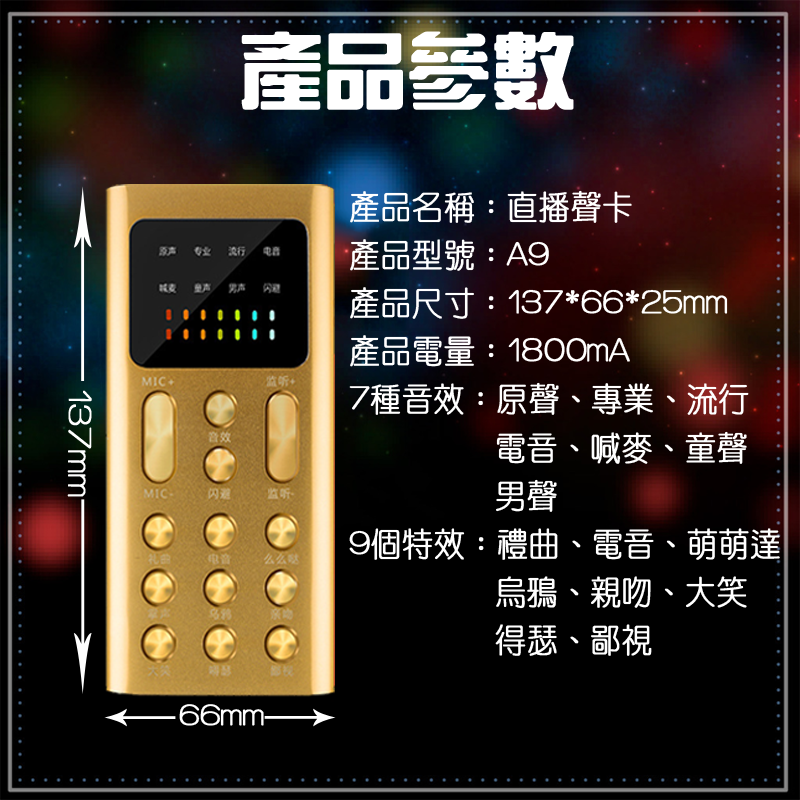
<style>
.page{position:relative;width:800px;height:800px;background:#000000}
.page>*{position:absolute;margin:0}
.t1{font:81.9px "HanWangZonYi";color:#ffffff;font-weight:bold}
.t2{font:33.4px "HanWangYenLight";color:#ffffff;font-weight:bold;scale:0.92 1}
.t3{font:33.1px "HanWangYenLight";color:#ffffff;font-weight:bold}
.t4{font:30px "HanWangYenLight";color:#ffffff;font-weight:bold}
</style>
<div class="page">
<p class="t1" style="left:241px;top:31px;width:333px;height:79px">產品參數</p>
<p class="t2" style="left:349px;top:190px;width:431px;height:466px">產品名稱：直播聲卡<br>產品型號：A9<br>產品尺寸：137*66*25mm<br>產品電量：1800mA<br>7種音效：原聲、專業、流行<br>         電音、喊麥、童聲<br>         男聲<br>9個特效：禮曲、電音、萌萌達<br>         烏鴉、親吻、大笑<br>         得瑟、鄙視</p>
<p class="t3" style="left:67px;top:390px;width:25px;height:107px;rotate:91deg">137mm</p>
<p class="t4" style="left:179px;top:704px;width:85px;height:22px">66mm</p>
</div>
